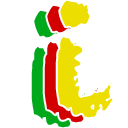
<style>
.page{position:relative;width:128px;height:128px;background:#ffffff}
.page>*{position:absolute;margin:0}
.t1{font:160px "Chalkduster"}
.t2{font:160px "Chalkduster";color:#ecde00}
</style>
<div class="page">
<p class="t1" style="left:44px;top:5px;width:56px;height:118px">i</p>
<p class="t2" style="left:57px;top:0px;width:56px;height:118px">i</p>
<p class="t1" style="left:31px;top:10px;width:56px;height:118px">i</p>
</div>
